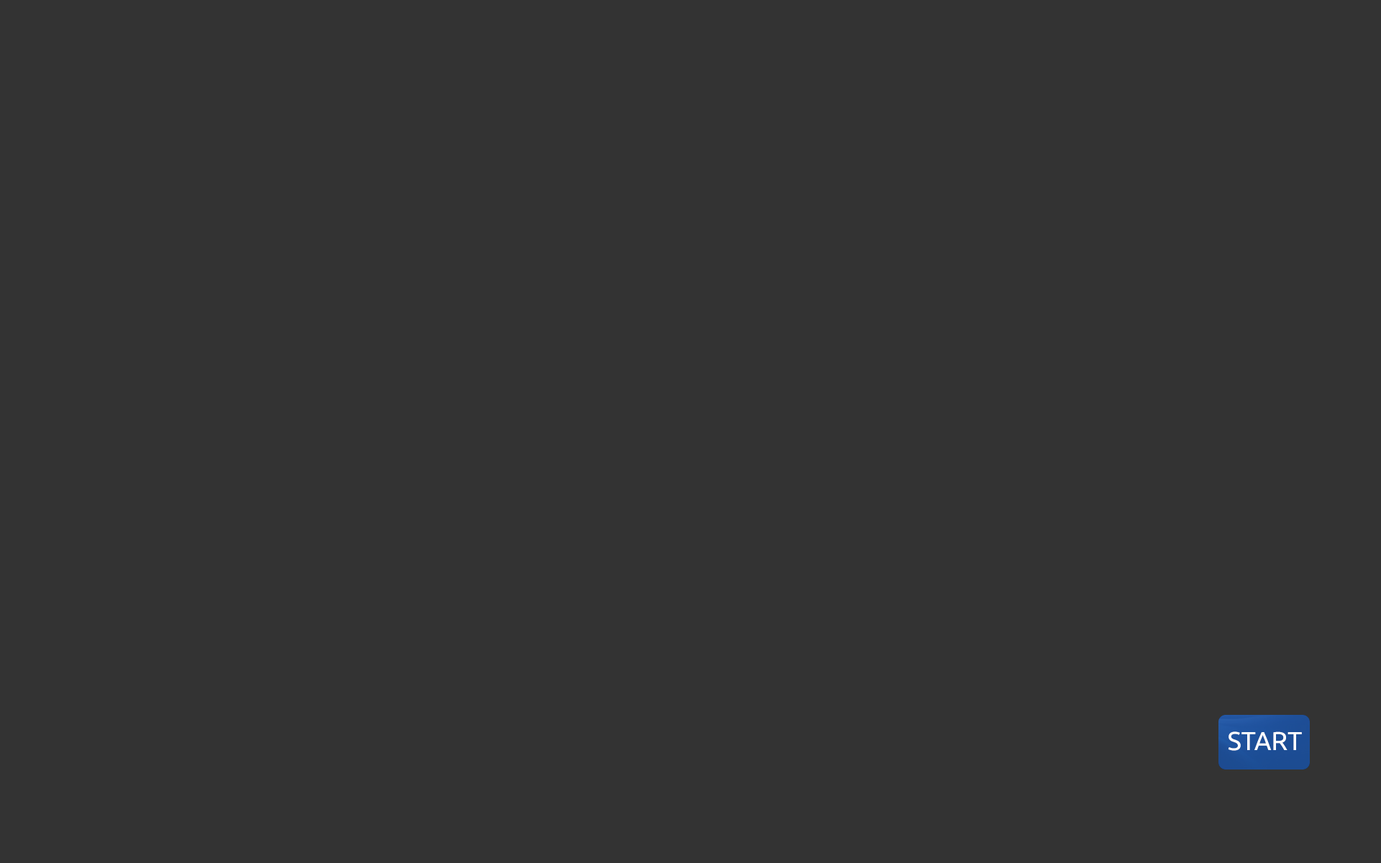
<style>
.page{position:relative;width:1381px;height:863px;background:#333333}
.page>*{position:absolute;margin:0}
.t1{font:25.9px "Ubuntu";color:#ffffff}
</style>
<div class="page">
<p class="t1" style="left:1228px;top:732px;width:74px;height:19px">START</p>
</div>
